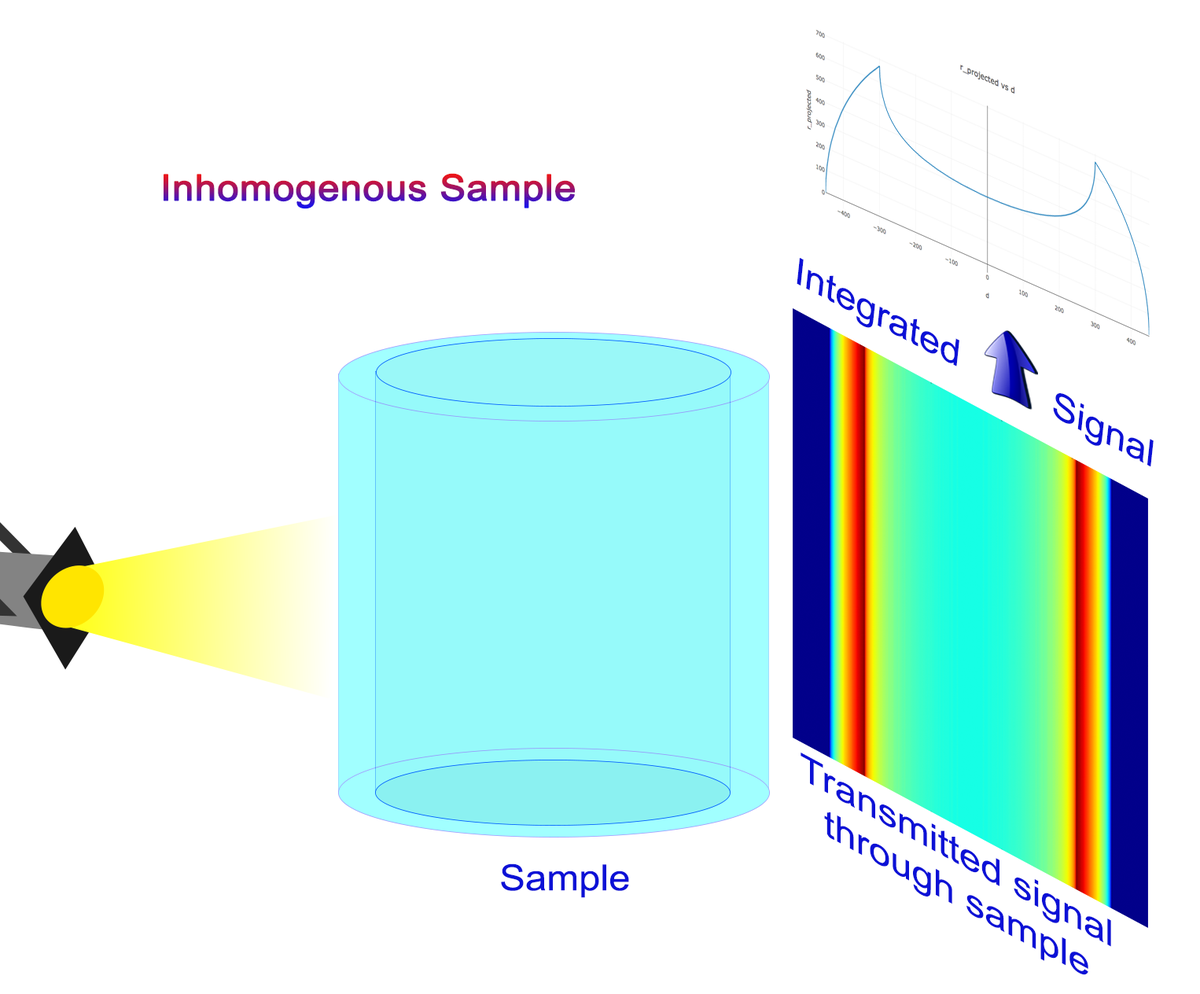
<style>
.page{position:relative;width:1200px;height:994px;background:#ffffff}
.page>*{position:absolute;margin:0}
.t1{font:36px "ArialMT";font-weight:bold;scale:1.07 1}
.t2{font:36px "ArialMT";color:#0c11d6;scale:1.15 1}
.t3{font:36px "ArialMT";color:#0c11d6;scale:1.22 1}
.t4{font:36px "ArialMT";color:#0c11d6;scale:1.07 1}
</style>
<div class="page">
<p class="t1" style="left:164px;top:173px;width:411px;height:36px">Inhomogenous Sample</p>
<p class="t2" style="left:796px;top:258px;width:357px;height:209px;rotate:27deg">Integrated         Signal</p>
<p class="t3" style="left:800px;top:752px;width:311px;height:223px;text-align:center;rotate:28deg">Transmitted signal<br>through sample</p>
<p class="t4" style="left:501px;top:863px;width:128px;height:35px">Sample</p>
</div>
